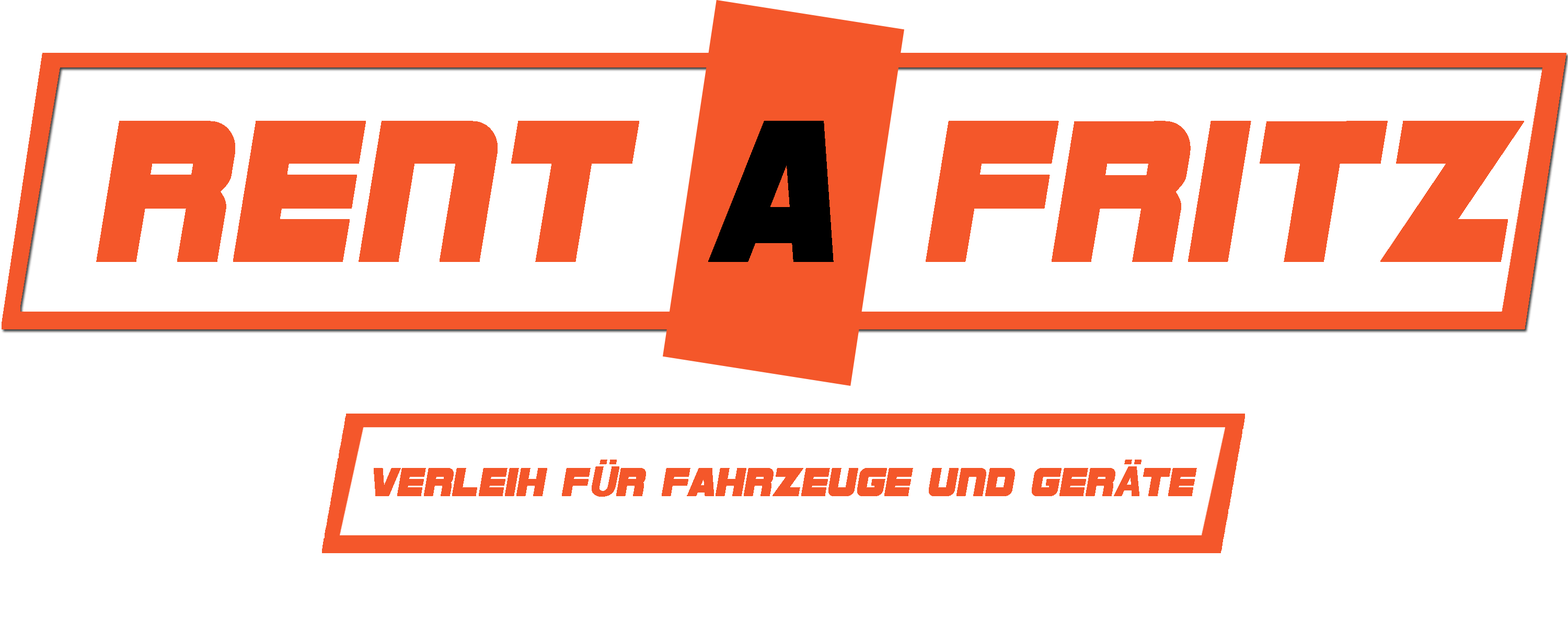
<style>
.page{position:relative;width:1568px;height:618px;background:#ffffff}
.page>*{position:absolute;margin:0}
.t1{font:210.2px "SFSportsNightNS";color:#f4572a;font-weight:bold;scale:0.94 1}
.t2{font:210.2px "SFSportsNightNS";color:#000000;font-weight:bold;scale:0.94 1}
.t3{font:41.2px "SFSportsNightNS";color:#f4572a;font-weight:bold}
.t4{font:41.2px "Roboto-BlackItalic";color:#f4572a;font-weight:bold}
</style>
<div class="page">
<p class="t1" style="left:96px;top:121px;width:1428px;height:141px">RENt <span class="t2">a </span>FRitz</p>
<p class="t3" style="left:374px;top:459px;width:823px;height:38px">VERLEIH F<span class="t4">Ü</span>R FAHRZEUGE UND GER<span class="t4">Ä</span>TE</p>
</div>
